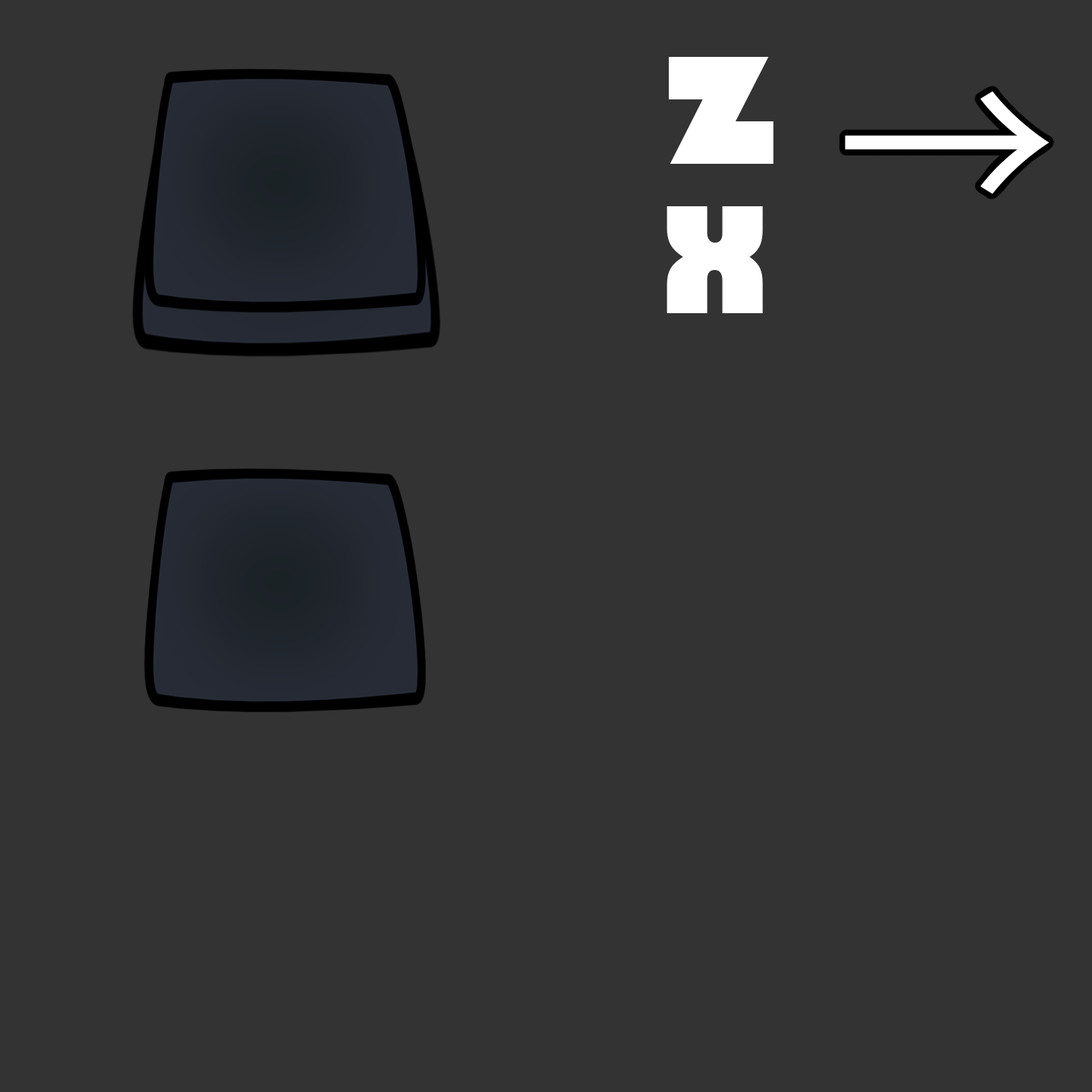
<style>
.page{position:relative;width:1092px;height:1092px;background:#333333}
.page>*{position:absolute;margin:0}
.t1{font:219.9px "Bauhaus93";color:#ffffff}
</style>
<div class="page">
<p class="t1" style="left:668px;top:57px;width:105px;height:107px">z</p>
<p class="t1" style="left:667px;top:206px;width:96px;height:107px">x</p>
</div>
